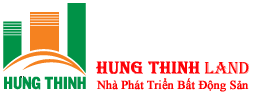
<style>
.page{position:relative;width:273px;height:92px;background:#ffffff}
.page>*{position:absolute;margin:0}
.t1{font:18px "Algerian";color:#fe0309;font-weight:bold}
.t2{font:18px "Algerian";color:#ff0000}
.t3{font:12px "TimesNewRomanPSMT";color:#fd0202;font-weight:bold}
</style>
<div class="page">
<p class="t1" style="left:96px;top:61px;width:104px;height:13px">HUNG THINH</p>
<p class="t2" style="left:204px;top:62px;width:45px;height:12px">land</p>
<p class="t3" style="left:96px;top:78px;width:153px;height:14px">Nhà Phát Triển Bất Động Sản</p>
</div>
